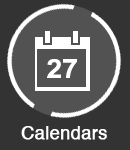
<style>
.page{position:relative;width:130px;height:150px;background:#333333}
.page>*{position:absolute;margin:0}
.t1{font:18px "Helvetica";color:#ffffff;font-weight:bold}
</style>
<div class="page">
<p class="t1" style="left:21px;top:126px;width:86px;height:14px">Calendars</p>
</div>
